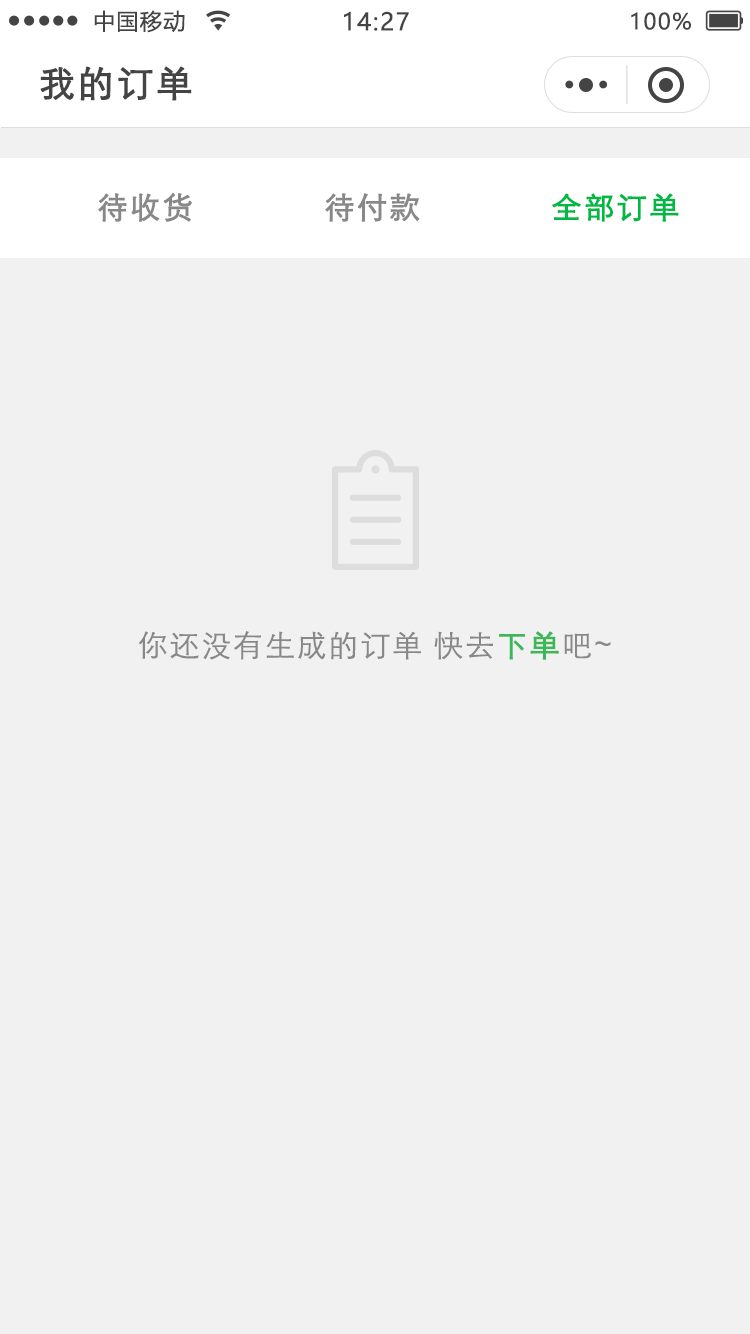
<style>
.page{position:relative;width:750px;height:1334px;background:#f0f1f0}
.page>*{position:absolute;margin:0}
.t1{font:22px "MicrosoftYaHei";letter-spacing:0.06em;color:#444444}
.t2{font:24px "MicrosoftYaHei";letter-spacing:0.06em;color:#444444}
.t3{font:36px "STXihei";letter-spacing:0.06em;color:#444444;font-weight:bold}
.t4{font:30px "STXihei";letter-spacing:0.06em;color:#888888;font-weight:bold}
.t5{font:30px "STXihei";letter-spacing:0.06em;color:#00b945;font-weight:bold}
.t6{font:30px "STXihei";letter-spacing:0.06em;color:#888888}
.t7{font:30px "STXihei";letter-spacing:0.06em;color:#3db858;font-weight:bold}
</style>
<div class="page">
<p class="t1" style="left:94px;top:10px;width:91px;height:23px">中国移动</p>
<p class="t2" style="left:344px;top:11px;width:65px;height:20px">14:27</p>
<p class="t1" style="left:631px;top:12px;width:60px;height:18px">100%</p>
<p class="t3" style="left:40px;top:66px;width:152px;height:35px">我的订单</p>
<p class="t4" style="left:98px;top:193px;width:94px;height:29px">待收货</p>
<p class="t4" style="left:325px;top:193px;width:95px;height:29px">待付款</p>
<p class="t5" style="left:552px;top:193px;width:127px;height:29px">全部订单</p>
<p class="t6" style="left:138px;top:631px;width:473px;height:29px">你还没有生成的订单 快去<span class="t7">下单</span>吧~</p>
</div>
